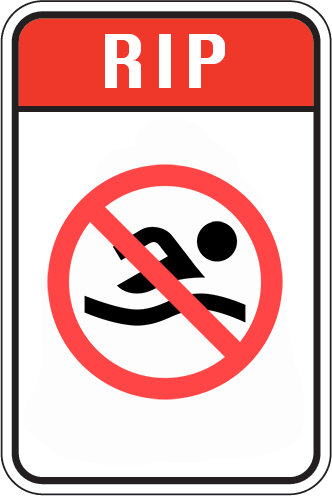
<style>
.page{position:relative;width:332px;height:496px;background:#ffffff}
.page>*{position:absolute;margin:0}
.t1{font:72px "Krungthep";color:#ffffff}
.t2{font:72px "Helvetica-Bold";color:#0e0202}
</style>
<div class="page">
<p class="t1" style="left:105px;top:34px;width:120px;height:54px"><span class="t2"> </span>RIP</p>
</div>
